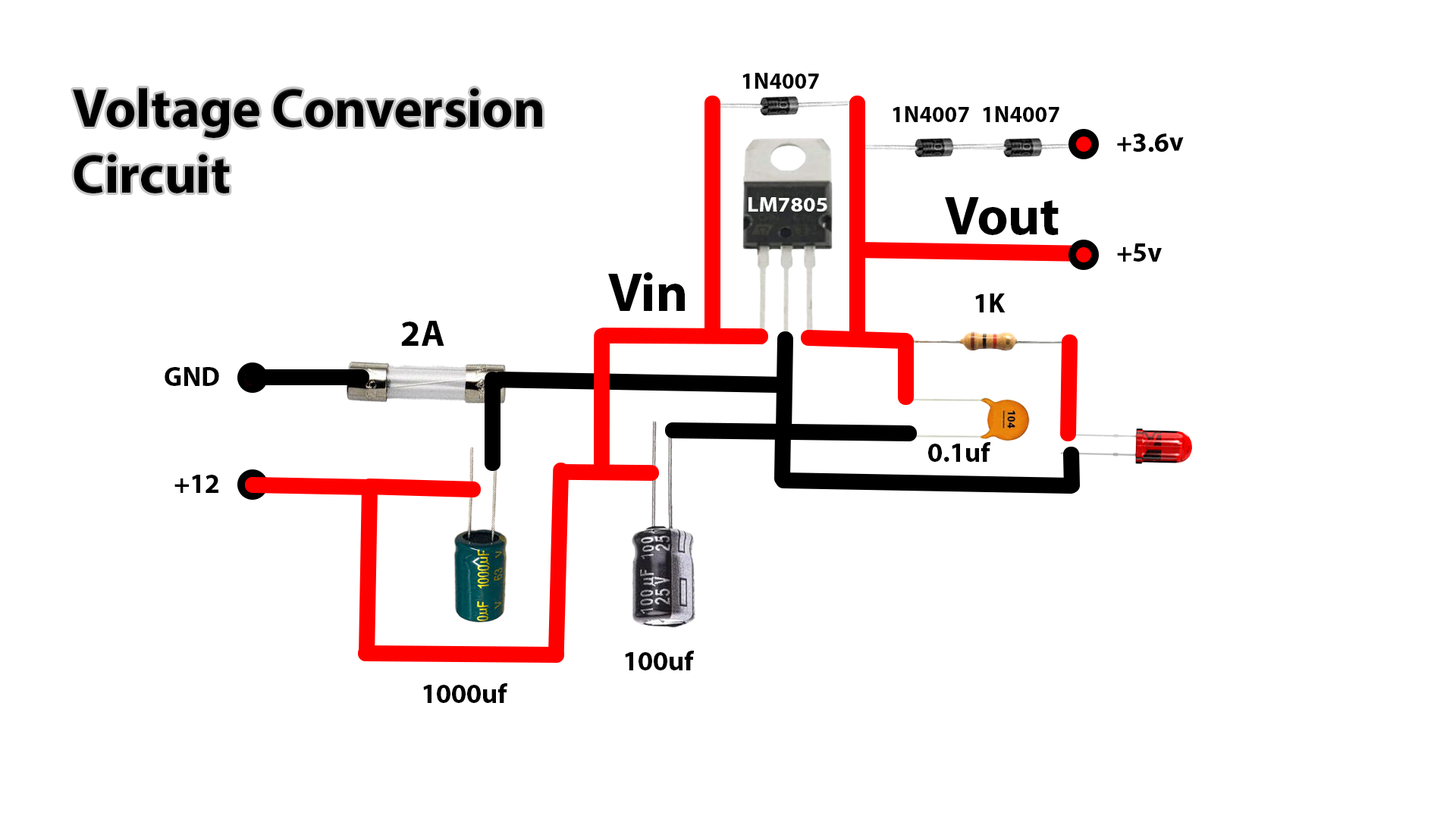
<style>
.page{position:relative;width:1456px;height:819px;background:#ffffff}
.page>*{position:absolute;margin:0}
.t1{font:22.7px "MyriadPro-Bold";color:#000000}
.t2{font:54.6px "MyriadPro-Bold";color:#000000}
.t3{font:27.3px "MyriadPro-Bold";color:#000000}
.t4{font:20.5px "MyriadPro-Bold";color:#ffffff;scale:1.11 1}
.t5{font:36.4px "MyriadPro-Bold";color:#000000}
</style>
<div class="page">
<p class="t1" style="left:742px;top:73px;width:77px;height:16px">1N4007</p>
<p class="t2" style="left:73px;top:88px;width:469px;height:105px">Voltage Conversion Circuit</p>
<p class="t1" style="left:893px;top:106px;width:76px;height:16px">1N4007</p>
<p class="t1" style="left:983px;top:106px;width:76px;height:16px">1N4007</p>
<p class="t3" style="left:1117px;top:133px;width:67px;height:19px;rotate:-1deg">+3.6v</p>
<p class="t4" style="left:748px;top:197px;width:79px;height:15px">LM7805</p>
<p class="t2" style="left:945px;top:197px;width:114px;height:38px">Vout</p>
<p class="t3" style="left:1117px;top:243px;width:45px;height:19px">+5v</p>
<p class="t2" style="left:608px;top:272px;width:77px;height:39px">Vin</p>
<p class="t3" style="left:975px;top:293px;width:31px;height:19px">1K</p>
<p class="t5" style="left:401px;top:321px;width:43px;height:25px">2A</p>
<p class="t3" style="left:165px;top:367px;width:54px;height:19px">GND</p>
<p class="t3" style="left:928px;top:442px;width:62px;height:20px">0.1uf</p>
<p class="t3" style="left:174px;top:475px;width:44px;height:18px">+12</p>
<p class="t3" style="left:625px;top:651px;width:69px;height:19px">100uf</p>
<p class="t3" style="left:423px;top:683px;width:84px;height:20px">1000uf</p>
</div>
